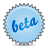
<style>
.page{position:relative;width:48px;height:48px;background:#ffffff}
.page>*{position:absolute;margin:0}
.t1{font:16.5px "Bello-Script"}
</style>
<div class="page">
<p class="t1" style="left:12px;top:17px;width:26px;height:16px;rotate:-17deg">beta</p>
<p class="t1" style="left:12px;top:17px;width:26px;height:16px;rotate:-17deg">beta</p>
</div>
